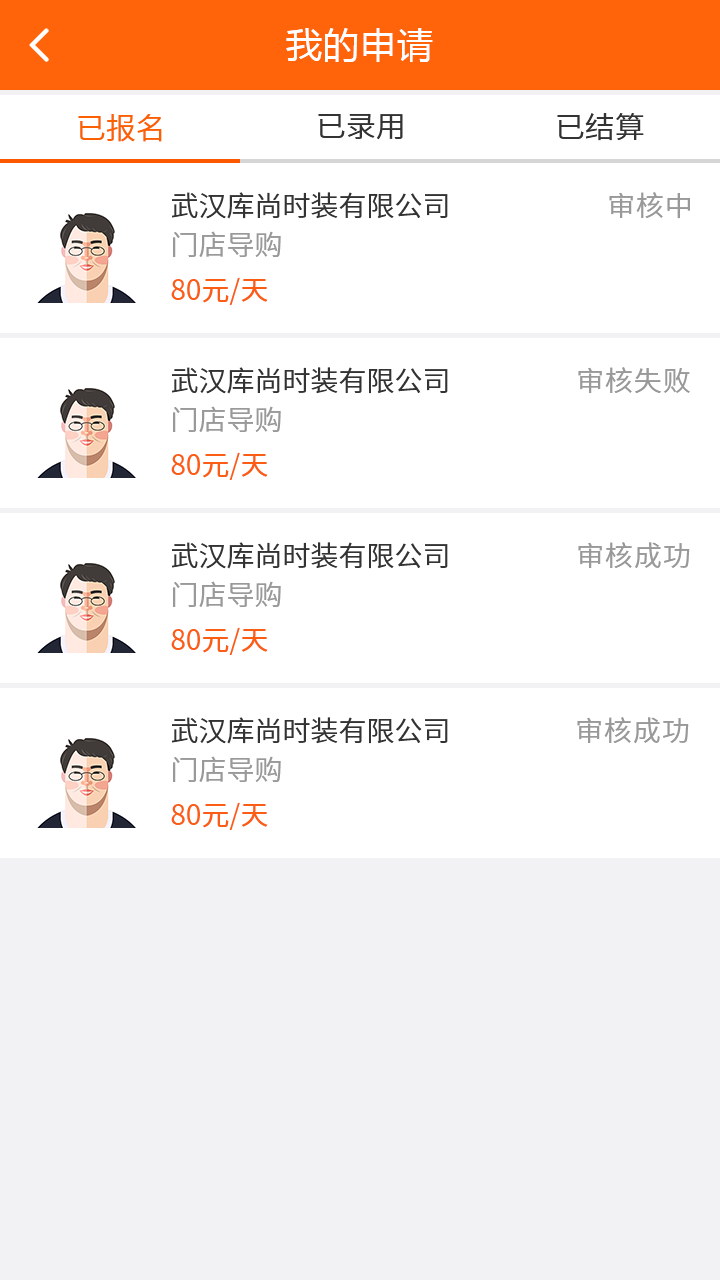
<style>
.page{position:relative;width:720px;height:1280px;background:#ffffff}
.page>*{position:absolute;margin:0}
.t1{font:36px "MicrosoftYaHei";letter-spacing:0.03em;color:#ffffff}
.t2{font:30px "NotoSansCJKsc-DemiLight";color:#333333;font-variant:small-caps}
.t3{font:30px "NotoSansCJKsc-DemiLight";color:#fb6100;font-variant:small-caps}
.t4{font:28px "NotoSansCJKsc-DemiLight";color:#333333;font-variant:small-caps}
.t5{font:28px "NotoSansCJKsc-DemiLight";letter-spacing:0.03em;color:#999999;font-variant:small-caps}
.t6{font:28px "NotoSansCJKsc-DemiLight";color:#999999;font-variant:small-caps}
.t7{font:28px "NotoSansCJKsc-Regular";color:#fb5d15;font-variant:small-caps}
</style>
<div class="page">
<p class="t1" style="left:286px;top:28px;width:147px;height:34px">我的申请</p>
<p class="t2" style="left:318px;top:113px;width:85px;height:27px">已录用</p>
<p class="t2" style="left:557px;top:113px;width:87px;height:28px">已结算</p>
<p class="t3" style="left:78px;top:114px;width:84px;height:28px">已报名</p>
<p class="t4" style="left:172px;top:192px;width:276px;height:27px">武汉库尚时装有限公司</p>
<p class="t5" style="left:609px;top:192px;width:81px;height:27px">审核中</p>
<p class="t6" style="left:173px;top:231px;width:108px;height:26px">门店导购</p>
<p class="t7" style="left:171px;top:277px;width:97px;height:28px">80元/天</p>
<p class="t4" style="left:172px;top:367px;width:276px;height:27px">武汉库尚时装有限公司</p>
<p class="t5" style="left:578px;top:367px;width:112px;height:27px">审核失败</p>
<p class="t6" style="left:173px;top:406px;width:108px;height:26px">门店导购</p>
<p class="t7" style="left:171px;top:452px;width:97px;height:28px">80元/天</p>
<p class="t4" style="left:172px;top:542px;width:276px;height:27px">武汉库尚时装有限公司</p>
<p class="t5" style="left:578px;top:542px;width:112px;height:27px">审核成功</p>
<p class="t6" style="left:173px;top:581px;width:108px;height:26px">门店导购</p>
<p class="t7" style="left:171px;top:627px;width:97px;height:28px">80元/天</p>
<p class="t4" style="left:172px;top:717px;width:276px;height:27px">武汉库尚时装有限公司</p>
<p class="t5" style="left:577px;top:717px;width:112px;height:27px">审核成功</p>
<p class="t6" style="left:173px;top:756px;width:108px;height:26px">门店导购</p>
<p class="t7" style="left:171px;top:802px;width:97px;height:28px">80元/天</p>
</div>
